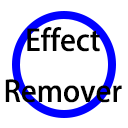
<style>
.page{position:relative;width:128px;height:128px;background:#ffffff}
.page>*{position:absolute;margin:0}
.t1{font:29.2px "AdobeHeitiStd-Regular";color:#000000}
</style>
<div class="page">
<p class="t1" style="left:5px;top:27px;width:117px;height:76px;text-align:center">Ｅffect<br>Remover</p>
</div>
